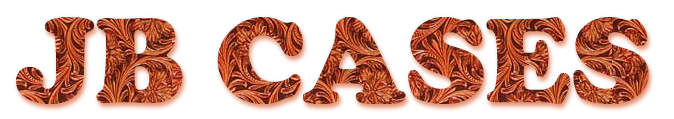
<style>
.page{position:relative;width:674px;height:119px;background:#ffffff}
.page>*{position:absolute;margin:0}
.t1{font:124px "CooperBlack"}
</style>
<div class="page">
<p class="t1" style="left:16px;top:17px;width:633px;height:87px">JB CASES</p>
</div>
